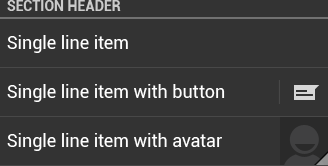
<style>
.page{position:relative;width:328px;height:166px;background:#333333}
.page>*{position:absolute;margin:0}
.t1{font:14px "Roboto-Bold";color:#cccccc}
.t2{font:18px "Roboto-Regular";color:#ffffff}
</style>
<div class="page">
<p class="t1" style="left:7px;top:0px;width:114px;height:11px">SECTION HEADER</p>
<p class="t2" style="left:7px;top:35px;width:121px;height:18px">Single line item</p>
<p class="t2" style="left:7px;top:84px;width:218px;height:18px">Single line item with button</p>
<p class="t2" style="left:7px;top:133px;width:215px;height:18px">Single line item with avatar</p>
</div>
